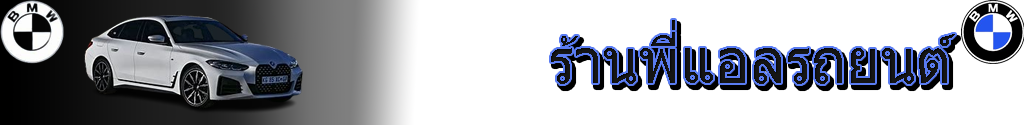
<style>
.page{position:relative;width:1024px;height:125px;background:#ffffff}
.page>*{position:absolute;margin:0}
.t1{font:62.6px "Tahoma";color:#151515;scale:0.94 1}
</style>
<div class="page">
<p class="t1" style="left:551px;top:20px;width:404px;height:64px">ร้านพี่แอลรถยนต์</p>
</div>
